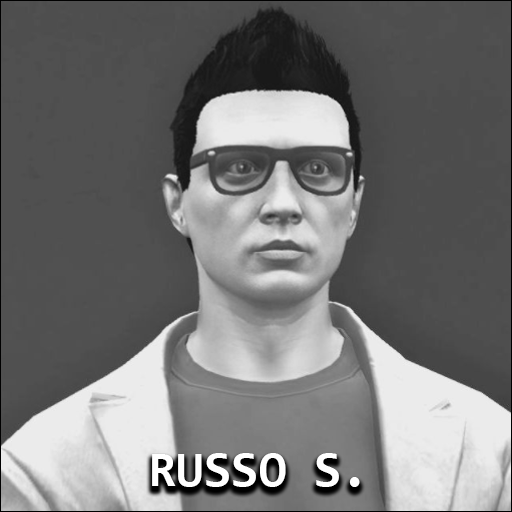
<style>
.page{position:relative;width:512px;height:512px}
.page>*{position:absolute;margin:0}
.t1{font:50px "Consolas-Bold";color:#ffffff}
</style>
<div class="page">
<p class="t1" style="left:152px;top:453px;width:208px;height:34px">RUSSO S.</p>
</div>
